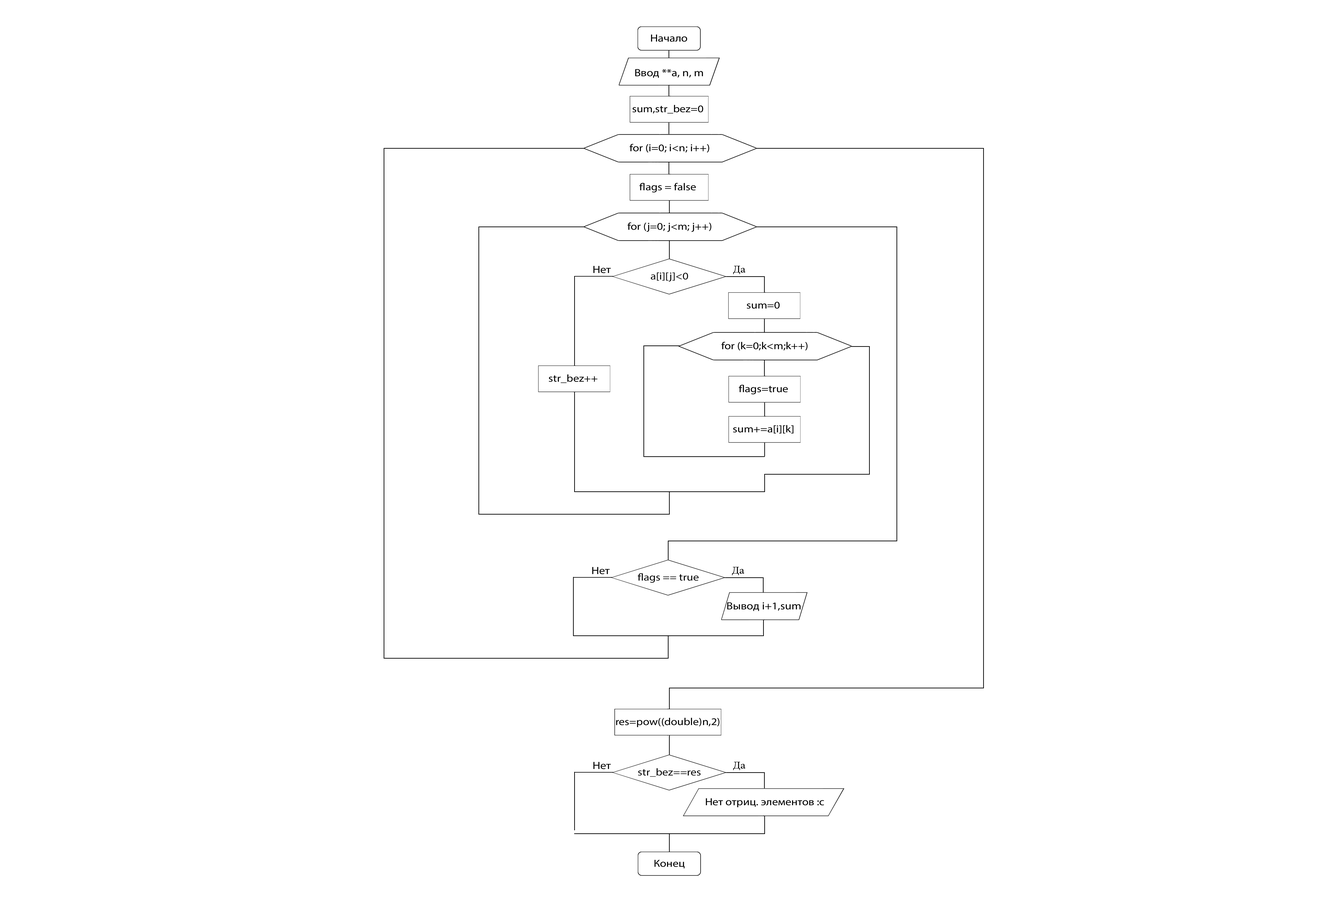
<style>
.page{position:relative;width:1325px;height:900px;background:#ffffff}
.page>*{position:absolute;margin:0}
.t1{font:10.4px "MyriadPro-Regular";color:#000000;scale:1.14 1}
.t2{font:10.2px "MyriadPro-Regular";color:#000000;scale:1.14 1}
.t3{font:10.4px "MyriadPro-Regular";color:#000000;scale:1.13 1}
</style>
<div class="page">
<p class="t1" style="left:651px;top:34px;width:36px;height:8px">Начало</p>
<p class="t1" style="left:635px;top:69px;width:68px;height:9px">Ввод **a, n, m</p>
<p class="t2" style="left:632px;top:105px;width:71px;height:9px">sum,str_bez=0</p>
<p class="t2" style="left:629px;top:144px;width:80px;height:9px">for (i=0; i&lt;n; i++)</p>
<p class="t2" style="left:639px;top:183px;width:57px;height:10px">flags = false</p>
<p class="t2" style="left:627px;top:222px;width:84px;height:10px">for (j=0; j&lt;m; j++)</p>
<p class="t3" style="left:593px;top:266px;width:18px;height:7px">Нет</p>
<p class="t2" style="left:651px;top:272px;width:37px;height:10px">a[i][j]&lt;0</p>
<p class="t2" style="left:747px;top:302px;width:32px;height:7px">sum=0</p>
<p class="t2" style="left:721px;top:342px;width:86px;height:9px">for (k=0;k&lt;m;k++)</p>
<p class="t2" style="left:549px;top:374px;width:48px;height:9px">str_bez++</p>
<p class="t2" style="left:739px;top:385px;width:49px;height:10px">flags=true</p>
<p class="t2" style="left:733px;top:425px;width:60px;height:9px">sum+=a[i][k]</p>
<p class="t3" style="left:592px;top:567px;width:18px;height:7px">Нет</p>
<p class="t2" style="left:638px;top:573px;width:61px;height:10px">flags == true</p>
<p class="t1" style="left:727px;top:602px;width:73px;height:9px">Вывод i+1,sum</p>
<p class="t2" style="left:616px;top:718px;width:103px;height:9px">res=pow((double)n,2)</p>
<p class="t3" style="left:593px;top:762px;width:18px;height:7px">Нет</p>
<p class="t2" style="left:638px;top:768px;width:63px;height:9px">str_bez==res</p>
<p class="t2" style="left:706px;top:798px;width:118px;height:9px">Нет отриц. элементов :c</p>
<p class="t2" style="left:654px;top:860px;width:30px;height:8px">Конец</p>
</div>
